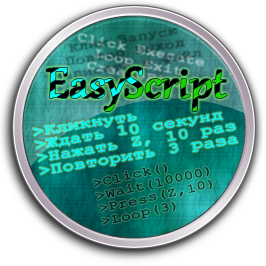
<style>
.page{position:relative;width:266px;height:266px}
.page>*{position:absolute;margin:0}
.t1{font:52px "Gabriola";font-weight:bold}
.t2{font:13.9px/13px "CourierNewPSMT";color:#00fff0;font-weight:bold;scale:1.37 1}
.t3{font:12.3px/13px "CourierNewPSMT";color:#002b27;font-weight:bold;scale:1.3 1}
</style>
<div class="page">
<p class="t1" style="left:46px;top:67px;width:181px;height:44px">EasyScript</p>
<p class="t2" style="left:32px;top:112px;width:206px;height:63px;rotate:-9deg">&gt;Кликнуть<br>&gt;Ждать 10 секунд<br>&gt;Нажать Z, 10 раз<br>&gt;Повторить 3 раза</p>
<p class="t3" style="left:93px;top:163px;width:119px;height:62px;rotate:-13deg">&gt;Click()<br>&gt;Wait(10000)<br>&gt;Press(Z,10)<br>&gt;Loop(3)</p>
</div>
